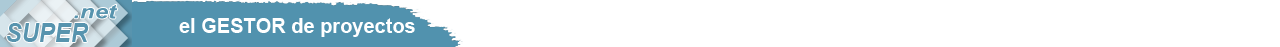
<style>
.page{position:relative;width:1280px;height:47px;background:#ffffff}
.page>*{position:absolute;margin:0}
.t1{font:19.2px "Arial-BoldItalicMT";color:#5894ae;scale:1.25 1}
.t2{font:26.4px "Arial-BoldItalicMT";color:#5894ae;scale:0.91 1}
.t3{font:20px "Arial-BoldMT";color:#ffffff}
</style>
<div class="page">
<p class="t1" style="left:74px;top:4px;width:44px;height:15px">.net</p>
<p class="t2" style="left:7px;top:23px;width:82px;height:19px">SUPER</p>
<p class="t3" style="left:179px;top:18px;width:236px;height:19px">el GESTOR de proyectos</p>
</div>
